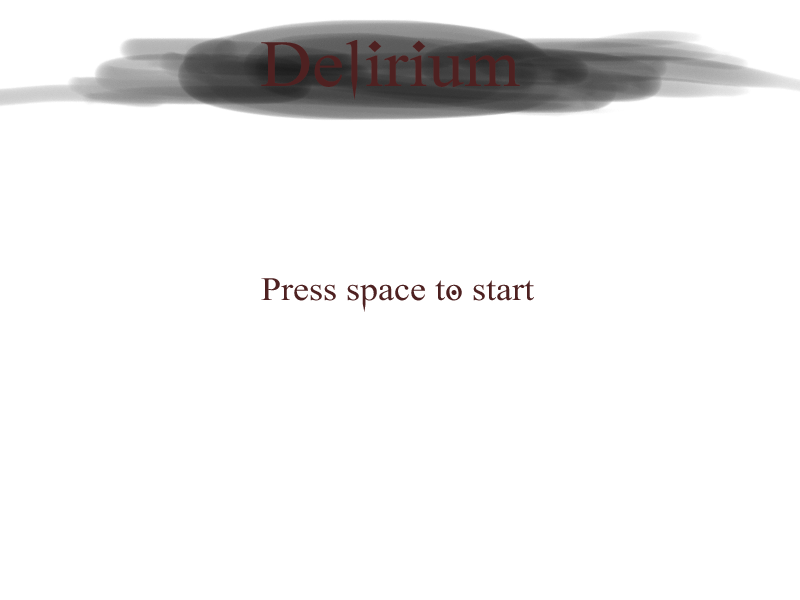
<style>
.page{position:relative;width:800px;height:600px;background:#ffffff}
.page>*{position:absolute;margin:0}
.t1{font:66.2px "GhostTheory";color:#4e2121;scale:1.09 1}
.t2{font:33.1px "GhostTheory";color:#4e2121;scale:1.09 1}
</style>
<div class="page">
<p class="t1" style="left:261px;top:40px;width:259px;height:60px">Delirium</p>
<p class="t2" style="left:261px;top:278px;width:273px;height:34px">Press space to start</p>
</div>
